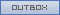
<style>
.page{position:relative;width:60px;height:15px}
.page>*{position:absolute;margin:0}
.t1{font:8px "BitDustTwo";color:#666666}
</style>
<div class="page">
<p class="t1" style="left:12px;top:5px;width:35px;height:5px">OUTBOX</p>
</div>
